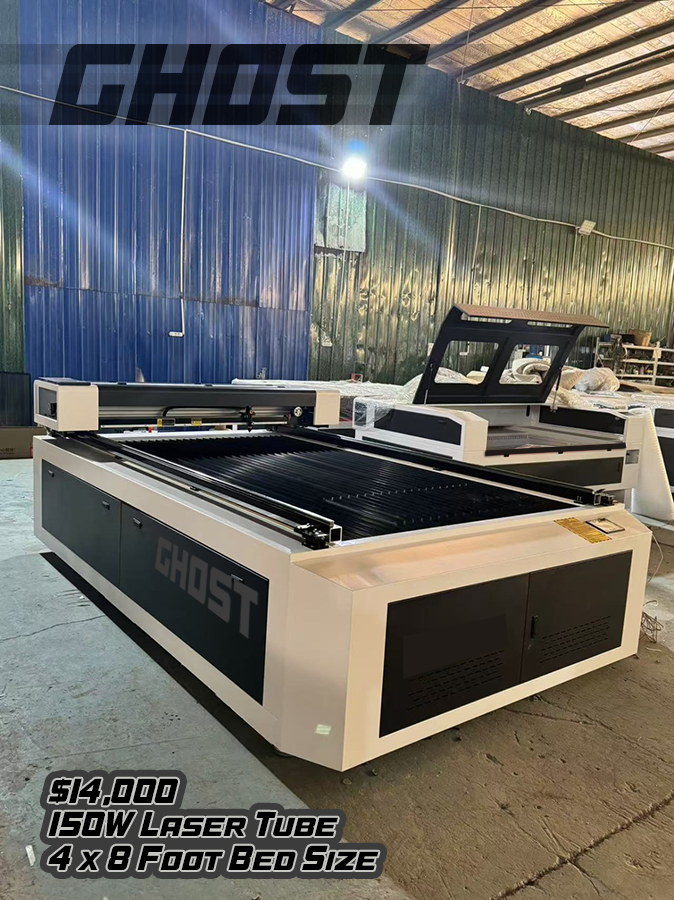
<style>
.page{position:relative;width:674px;height:900px}
.page>*{position:absolute;margin:0}
.t1{font:130.7px "A4SPEEDBold";color:#0e141e;scale:0.72 1}
.t2{font:39.1px "A4SPEEDBold";color:#000000;scale:0.72 1}
</style>
<div class="page">
<p class="t1" style="left:48px;top:44px;width:383px;height:81px">GHOST</p>
<p class="t2" style="left:48px;top:778px;width:331px;height:92px">$14,000<br>150W Laser Tube<br>4 x 8 Foot Bed Size</p>
</div>
